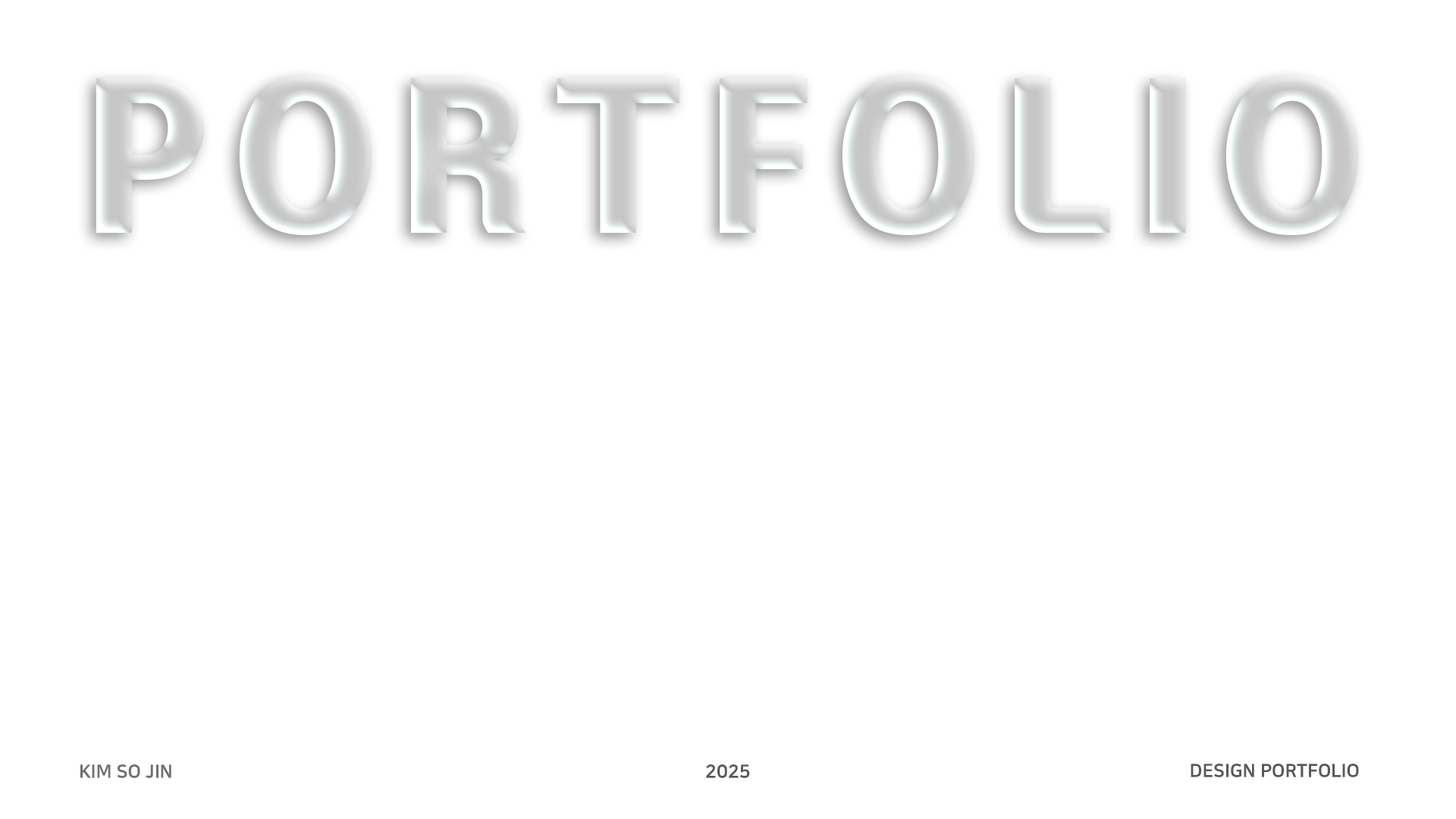
<style>
.page{position:relative;width:1456px;height:819px;background:#ffffff}
.page>*{position:absolute;margin:0}
.t1{font:176.9px "HeadlineR-HM";letter-spacing:0.1em;color:#d3d4d4;text-transform:uppercase}
.t2{font:18.2px "NanumSquareEB";color:#6d7171;text-transform:uppercase}
.t3{font:18.2px "NanumSquareEB";color:#545959;text-transform:uppercase}
</style>
<div class="page">
<p class="t1" style="left:96px;top:76px;width:1262px;height:159px">portfolio</p>
<p class="t2" style="left:80px;top:764px;width:91px;height:14px">KIM SO JIN</p>
<p class="t3" style="left:706px;top:764px;width:44px;height:14px">2025</p>
<p class="t3" style="left:1191px;top:764px;width:168px;height:13px">design portfolio</p>
</div>
